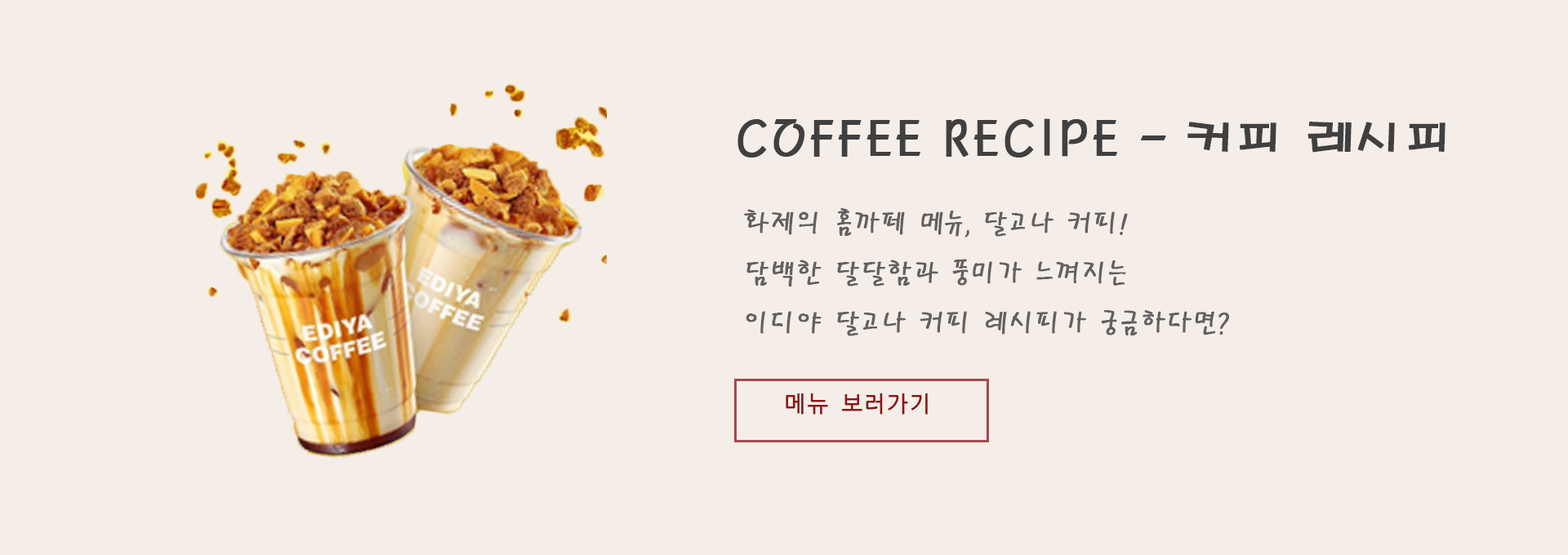
<style>
.page{position:relative;width:1568px;height:555px;background:#f5eee8}
.page>*{position:absolute;margin:0}
.t1{font:49px "H2porM";color:#404040;font-weight:bold}
.t2{font:28.6px "PyunjiR-HM";color:#626060;font-weight:bold}
.t3{font:22.1px "NanumGothicCoding";color:#8a1616;font-weight:bold}
</style>
<div class="page">
<p class="t1" style="left:737px;top:118px;width:709px;height:40px">COFFEE RECIPE - 커피 레시피</p>
<p class="t2" style="left:744px;top:208px;width:485px;height:128px">화제의 홈까페 메뉴, 달고나 커피!<br>담백한 달달함과 풍미가 느껴지는 <br>이디야 달고나 커피 레시피가 궁금하다면?</p>
<p class="t3" style="left:786px;top:394px;width:142px;height:21px">메뉴 보러가기</p>
</div>
